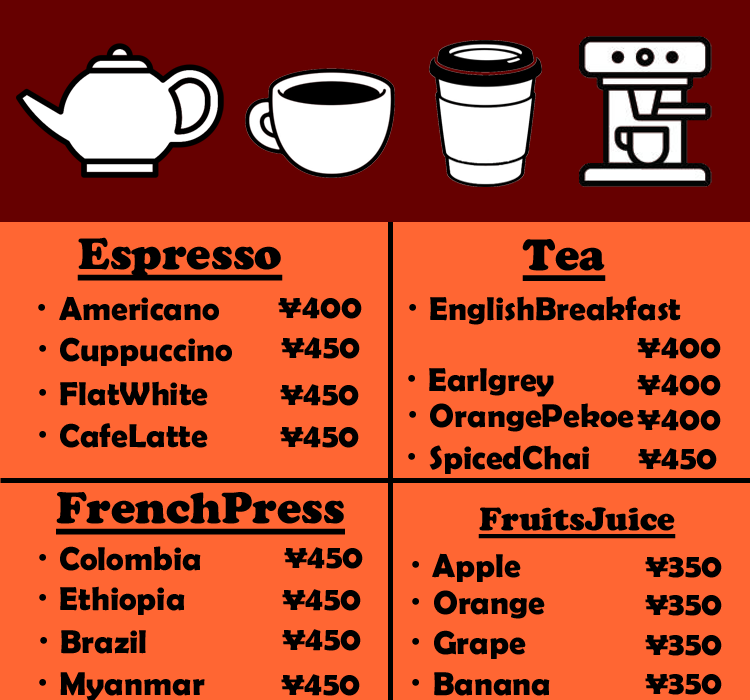
<style>
.page{position:relative;width:750px;height:700px;background:#ff6633}
.page>*{position:absolute;margin:0}
.t1{font:45.8px "CooperBlack";color:#000000;text-decoration:underline}
.t2{font:33.3px "BerlinSansFBDemi-Bold";color:#000000}
.t3{font:33.3px "KozGoPr6N-Regular";color:#000000}
.t4{font:33.3px "CooperBlack";color:#000000;text-decoration:underline}
</style>
<div class="page">
<p class="t1" style="left:77px;top:237px;width:206px;height:44px">Espresso</p>
<p class="t1" style="left:522px;top:239px;width:84px;height:42px">Tea</p>
<p class="t2" style="left:38px;top:296px;width:181px;height:25px"><span class="t3">・</span>Americano</p>
<p class="t2" style="left:278px;top:297px;width:84px;height:22px">¥400</p>
<p class="t2" style="left:409px;top:296px;width:272px;height:29px"><span class="t3">・</span>EnglishBreakfast</p>
<p class="t2" style="left:39px;top:337px;width:193px;height:29px"><span class="t3">・</span>Cuppuccino</p>
<p class="t2" style="left:281px;top:337px;width:79px;height:22px">¥450</p>
<p class="t2" style="left:637px;top:337px;width:84px;height:22px">¥400</p>
<p class="t2" style="left:408px;top:368px;width:146px;height:29px"><span class="t3">・</span>Earlgrey</p>
<p class="t2" style="left:637px;top:374px;width:84px;height:22px">¥400</p>
<p class="t2" style="left:39px;top:381px;width:169px;height:25px"><span class="t3">・</span>FlatWhite</p>
<p class="t2" style="left:280px;top:384px;width:79px;height:22px">¥450</p>
<p class="t2" style="left:409px;top:403px;width:225px;height:29px"><span class="t3">・</span>OrangePekoe</p>
<p class="t2" style="left:637px;top:409px;width:84px;height:22px">¥400</p>
<p class="t2" style="left:39px;top:423px;width:169px;height:25px"><span class="t3">・</span>CafeLatte</p>
<p class="t2" style="left:280px;top:426px;width:79px;height:22px">¥450</p>
<p class="t2" style="left:408px;top:445px;width:181px;height:29px"><span class="t3">・</span>SpicedChai</p>
<p class="t2" style="left:638px;top:448px;width:79px;height:22px">¥450</p>
<p class="t1" style="left:56px;top:492px;width:289px;height:43px">FrenchPress</p>
<p class="t4" style="left:478px;top:507px;width:198px;height:32px">FruitsJuice</p>
<p class="t2" style="left:39px;top:546px;width:162px;height:25px"><span class="t3">・</span>Colombia</p>
<p class="t2" style="left:284px;top:547px;width:79px;height:22px">¥450</p>
<p class="t2" style="left:412px;top:553px;width:109px;height:29px"><span class="t3">・</span>Apple</p>
<p class="t2" style="left:645px;top:557px;width:77px;height:21px">¥350</p>
<p class="t2" style="left:39px;top:586px;width:146px;height:29px"><span class="t3">・</span>Ethiopia</p>
<p class="t2" style="left:282px;top:589px;width:79px;height:22px">¥450</p>
<p class="t2" style="left:412px;top:590px;width:133px;height:29px"><span class="t3">・</span>Orange</p>
<p class="t2" style="left:645px;top:595px;width:77px;height:21px">¥350</p>
<p class="t2" style="left:40px;top:630px;width:106px;height:24px"><span class="t3">・</span>Brazil</p>
<p class="t2" style="left:282px;top:629px;width:79px;height:22px">¥450</p>
<p class="t2" style="left:412px;top:630px;width:114px;height:29px"><span class="t3">・</span>Grape</p>
<p class="t2" style="left:645px;top:635px;width:77px;height:21px">¥350</p>
<p class="t2" style="left:39px;top:672px;width:166px;height:29px"><span class="t3">・</span>Myanmar</p>
<p class="t2" style="left:281px;top:674px;width:79px;height:22px">¥450</p>
<p class="t2" style="left:412px;top:672px;width:138px;height:24px"><span class="t3">・</span>Banana</p>
<p class="t2" style="left:645px;top:674px;width:77px;height:21px">¥350</p>
</div>
